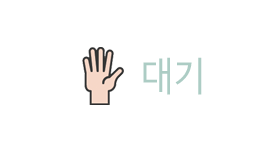
<style>
.page{position:relative;width:280px;height:150px;background:#ffffff}
.page>*{position:absolute;margin:0}
.t1{font:40px "SeN-CM";color:#acccc4}
</style>
<div class="page">
<p class="t1" style="left:143px;top:57px;width:59px;height:38px">대기</p>
</div>
